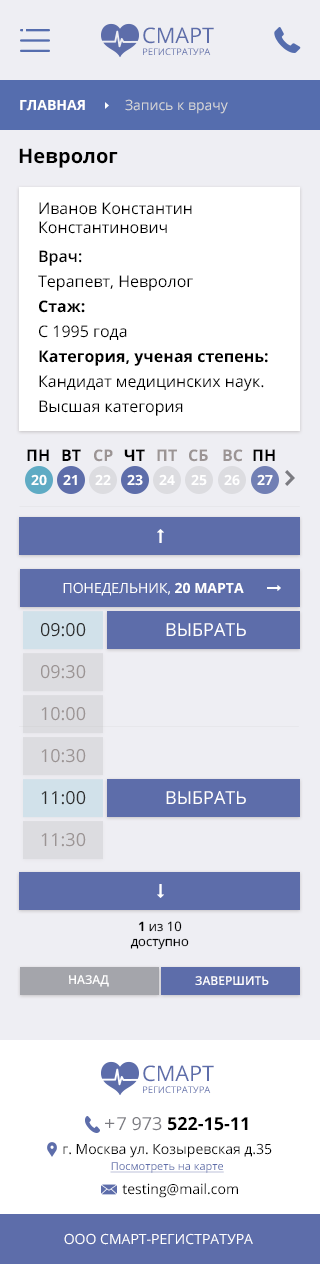
<style>
.page{position:relative;width:320px;height:1264px;background:#eeeef3}
.page>*{position:absolute;margin:0}
.t1{font:9.3px/11.5px "OpenSans";color:#5d6daa}
.t2{font:21.5px/11.5px "OpenSans";color:#5d6daa}
.t3{font:14px "OpenSans";color:#d8d8d8}
.t4{font:14px "OpenSans-Bold";color:#ffffff}
.t5{font:20px "OpenSans-Bold";color:#000000}
.t6{font:16px "OpenSans";color:#000000}
.t7{font:16px/25px "OpenSans";color:#000000}
.t8{font:16px/25px "OpenSans-Semibold";color:#000000}
.t9{font:16px/25px "OpenSans-Bold";color:#000000}
.t10{font:16px "OpenSans-Bold";color:#000000}
.t11{font:16px "OpenSans-Bold";color:#9b9494}
.t12{font:14px "OpenSans";color:#ffffff}
.t13{font:18px "OpenSans";color:#2d2d2d}
.t14{font:18px "OpenSans";color:#ffffff}
.t15{font:18px "OpenSans";color:#9b9494}
.t16{font:13px "OpenSans";color:#000000}
.t17{font:13px "OpenSans-Bold";color:#000000}
.t18{font:12.1px "OpenSans-Semibold";color:#ffffff;text-transform:uppercase}
.t19{font:18px "HelveticaNeue";color:#7b7b81}
.t20{font:18px "OpenSans-Bold";color:#000000}
.t21{font:18px "OpenSans";color:#000000}
.t22{font:18px "OpenSans";color:#7b7b81}
.t23{font:14px/14px "OpenSans";color:#000000}
.t24{font:11px/16px "OpenSans";color:#5d6daa;text-decoration:underline}
.t25{font:14px "OpenSans";color:#000000}
</style>
<div class="page">
<p class="t1" style="left:143px;top:27px;width:71px;height:28px"><span class="t2">CМАРТ<br></span>РЕГИСТРАТУРА</p>
<p class="t3" style="left:20px;top:99px;width:208px;height:15px"><span class="t4">ГЛАВНАЯ          </span>Запись к врачу</p>
<p class="t5" style="left:19px;top:148px;width:99px;height:20px">Невролог</p>
<p class="t6" style="left:39px;top:202px;width:153px;height:32px">Иванов Константин<br>Константинович</p>
<p class="t7" style="left:38px;top:250px;width:230px;height:166px"><span class="t8">Врач:<br></span>Терапевт, Невролог<br><span class="t9">Стаж:<br></span>С 1995 года<br><span class="t9">Категория, ученая степень:<br></span>Кандидат медицинских наук. <br>Высшая категория</p>
<p class="t10" style="left:27px;top:449px;width:22px;height:12px">ПН</p>
<p class="t10" style="left:62px;top:449px;width:19px;height:12px">ВТ</p>
<p class="t11" style="left:94px;top:449px;width:19px;height:13px">СР</p>
<p class="t10" style="left:124px;top:449px;width:21px;height:12px">ЧТ</p>
<p class="t11" style="left:157px;top:449px;width:20px;height:12px">ПТ</p>
<p class="t11" style="left:189px;top:449px;width:19px;height:13px">СБ</p>
<p class="t11" style="left:223px;top:449px;width:20px;height:13px">ВС</p>
<p class="t10" style="left:253px;top:449px;width:22px;height:12px">ПН</p>
<p class="t4" style="left:31px;top:474px;width:16px;height:12px">20</p>
<p class="t4" style="left:63px;top:474px;width:14px;height:11px">21</p>
<p class="t4" style="left:95px;top:474px;width:16px;height:11px">22</p>
<p class="t4" style="left:127px;top:474px;width:16px;height:12px">23</p>
<p class="t4" style="left:159px;top:474px;width:16px;height:11px">24</p>
<p class="t4" style="left:191px;top:474px;width:16px;height:12px">25</p>
<p class="t4" style="left:224px;top:474px;width:16px;height:12px">26</p>
<p class="t4" style="left:257px;top:474px;width:16px;height:11px">27</p>
<p class="t12" style="left:63px;top:582px;width:181px;height:14px">ПОНЕДЕЛЬНИК, <span class="t4">20 МАРТА</span></p>
<p class="t13" style="left:41px;top:623px;width:45px;height:14px">09:00</p>
<p class="t14" style="left:166px;top:623px;width:80px;height:13px">ВЫБРАТЬ</p>
<p class="t15" style="left:41px;top:665px;width:45px;height:14px">09:30</p>
<p class="t15" style="left:41px;top:707px;width:45px;height:14px">10:00</p>
<p class="t15" style="left:41px;top:749px;width:45px;height:14px">10:30</p>
<p class="t13" style="left:41px;top:791px;width:45px;height:14px">11:00</p>
<p class="t14" style="left:166px;top:791px;width:80px;height:13px">ВЫБРАТЬ</p>
<p class="t15" style="left:41px;top:833px;width:45px;height:14px">11:30</p>
<p class="t16" style="left:130px;top:921px;width:59px;height:29px;text-align:center"><span class="t17">1</span> из 10<br>доступно</p>
<p class="t18" style="left:69px;top:975px;width:40px;height:12px">НАЗАД</p>
<p class="t18" style="left:195px;top:976px;width:74px;height:9px">ЗАВЕРШИТЬ</p>
<p class="t1" style="left:143px;top:1065px;width:71px;height:28px"><span class="t2">CМАРТ<br></span>РЕГИСТРАТУРА</p>
<p class="t19" style="left:105px;top:1119px;width:10px;height:9px">+</p>
<p class="t20" style="left:117px;top:1117px;width:131px;height:14px"><span class="t21">  </span><span class="t22">7 973 </span>522-15-11</p>
<p class="t23" style="left:63px;top:1143px;width:209px;height:30px;text-align:center">г. Москва ул. Козыревская д.35<br><span class="t24">Посмотреть на карте</span></p>
<p class="t25" style="left:122px;top:1183px;width:116px;height:15px">testing@mail.com</p>
<p class="t12" style="left:64px;top:1233px;width:189px;height:12px">ООО СМАРТ-РЕГИСТРАТУРА</p>
</div>
